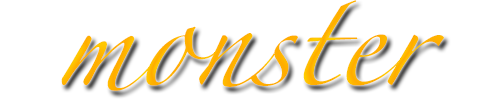
<style>
.page{position:relative;width:500px;height:100px;background:#ffffff}
.page>*{position:absolute;margin:0}
.t1{font:90px "Zapfino";color:#ffb200}
</style>
<div class="page">
<p class="t1" style="left:61px;top:0px;width:383px;height:91px">monster</p>
</div>
